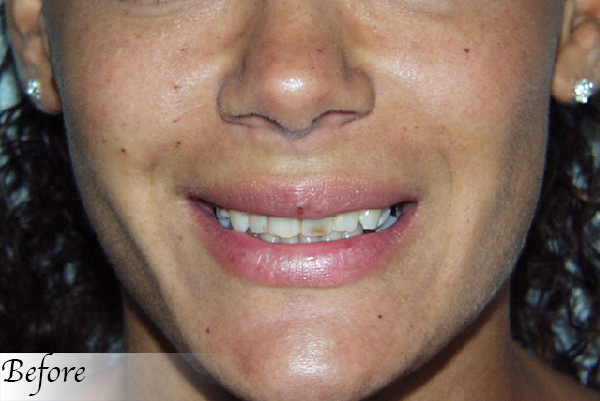
<style>
.page{position:relative;width:600px;height:401px}
.page>*{position:absolute;margin:0}
.t1{font:56px "Apple-Chancery";color:#000000}
</style>
<div class="page">
<p class="t1" style="left:2px;top:353px;width:83px;height:43px">Before</p>
</div>
